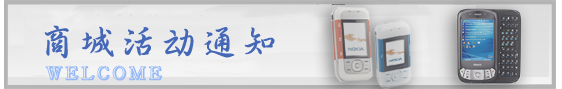
<style>
.page{position:relative;width:562px;height:89px}
.page>*{position:absolute;margin:0}
.t1{font:36px "By-JOSSQ-DMF-in-BeiJing";letter-spacing:0.1em;color:#4467b7;font-weight:bold}
.t2{font:20px "ChrluenEG-Medium-GB";letter-spacing:0.1em;color:#95b8f9;font-weight:bold}
</style>
<div class="page">
<p class="t1" style="left:44px;top:25px;width:231px;height:34px">商城活动通知</p>
<p class="t2" style="left:45px;top:65px;width:118px;height:16px">WELCOME</p>
</div>
